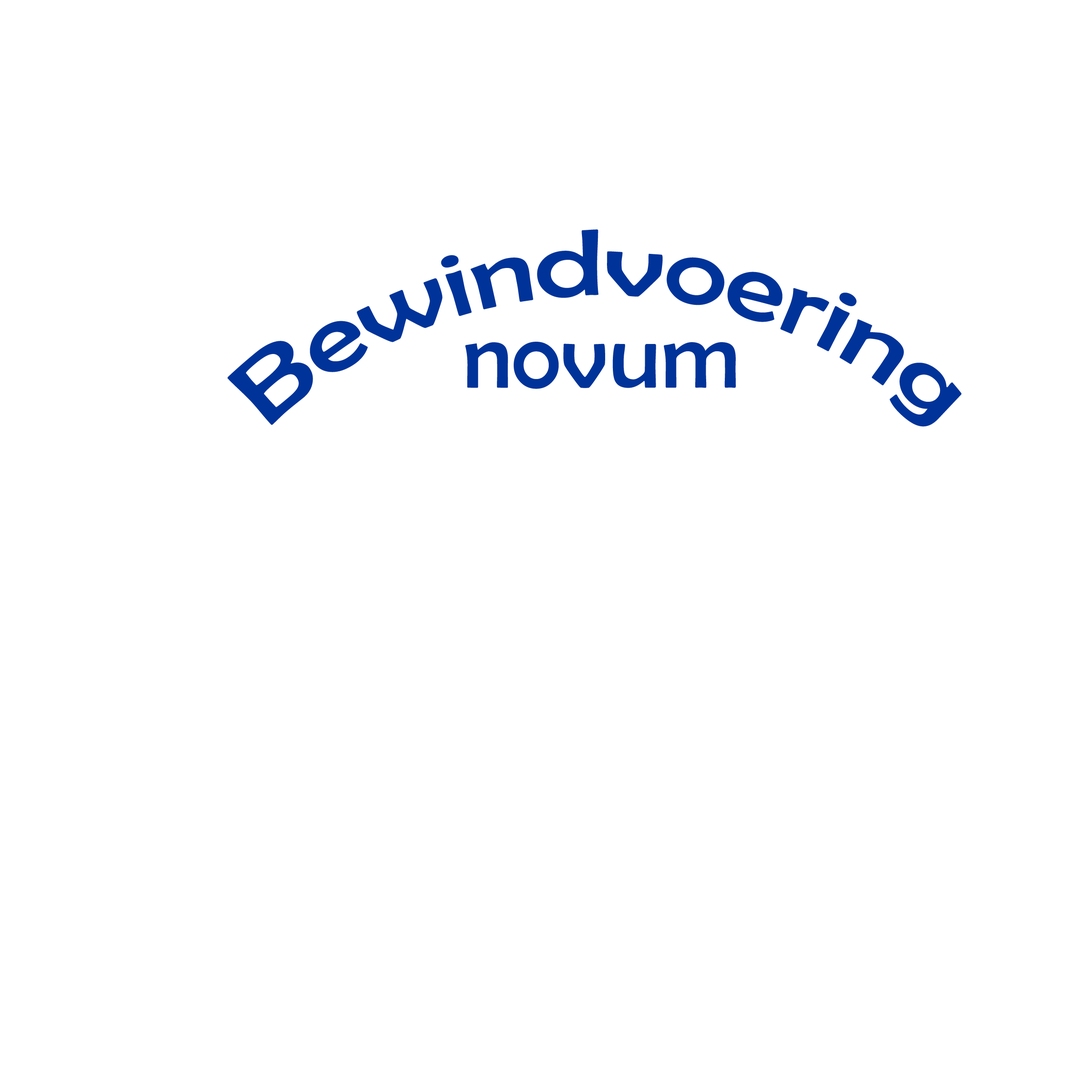
<style>
.page{position:relative;width:1092px;height:1092px;background:#ffffff}
.page>*{position:absolute;margin:0}
.t1{font:94.8px/34.1px "BerlinSansFB-Reg";color:#003399}
.t2{font:94.8px "BerlinSansFB-Reg";color:#003399}
</style>
<div class="page">
<p class="t1" style="left:227px;top:229px;width:734px;height:198px;text-align:center">Bewindvoering</p>
<p class="t2" style="left:465px;top:342px;width:271px;height:47px">novum</p>
</div>
